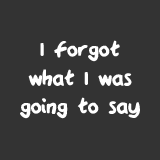
<style>
.page{position:relative;width:160px;height:160px;background:#333333}
.page>*{position:absolute;margin:0}
.t1{font:23.9px "QAReports";color:#ffffff}
</style>
<div class="page">
<p class="t1" style="left:20px;top:40px;width:120px;height:79px;text-align:center">I forgot<br>what I was<br>going to say</p>
</div>
